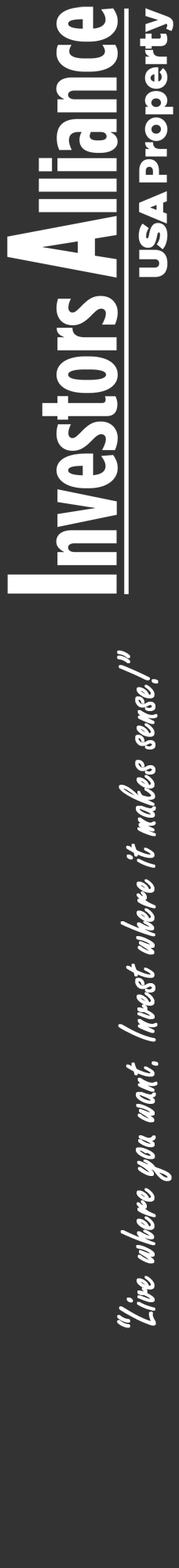
<style>
.page{position:relative;width:179px;height:1568px;background:#333333}
.page>*{position:absolute;margin:0}
.t1{font:56.6px "FreestyleScript-Regular";color:#ffffff;font-weight:bold;scale:0.79 1}
</style>
<div class="page">
<p class="t1" style="left:117px;top:650px;width:55px;height:678px;rotate:-90deg">“Live where you want. Invest where it makes sense!”</p>
</div>
